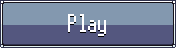
<style>
.page{position:relative;width:176px;height:48px;background:#8398af}
.page>*{position:absolute;margin:0}
.t1{font:24px "Terminal";color:#ffffff}
</style>
<div class="page">
<p class="t1" style="left:68px;top:14px;width:38px;height:22px">Play</p>
</div>
